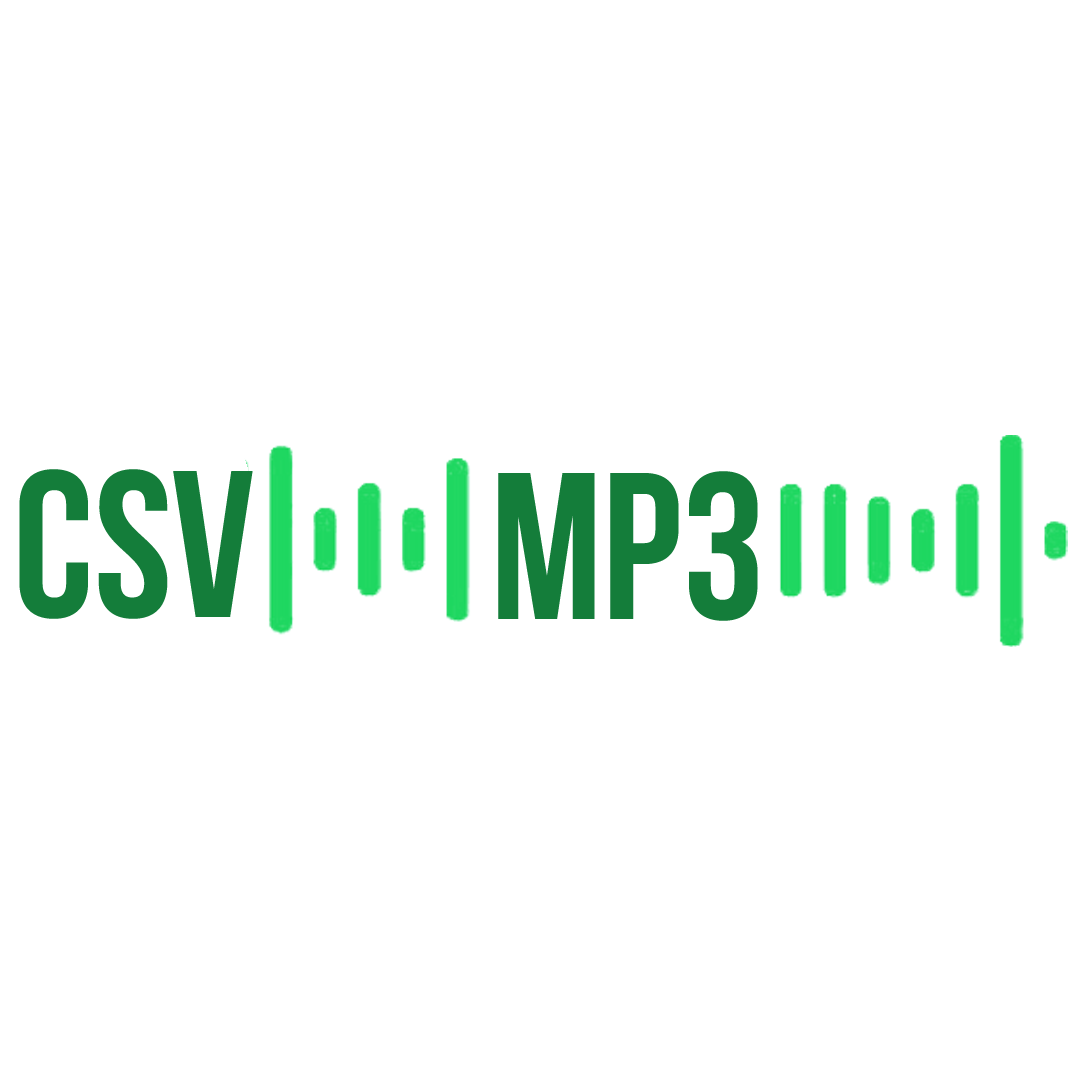
<style>
.page{position:relative;width:1080px;height:1080px;background:#ffffff}
.page>*{position:absolute;margin:0}
.t1{font:208.7px "BebasNeueBold";color:#147d3a}
</style>
<div class="page">
<p class="t1" style="left:19px;top:469px;width:234px;height:150px">csv</p>
<p class="t1" style="left:498px;top:471px;width:260px;height:150px">MP3</p>
</div>
